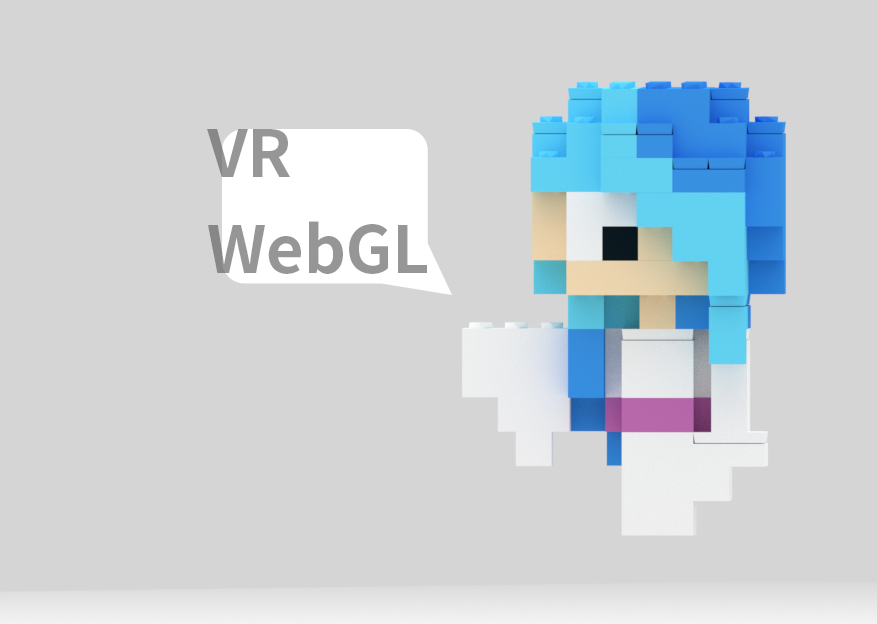
<style>
.page{position:relative;width:877px;height:624px;background:#d5d5d5}
.page>*{position:absolute;margin:0}
.t1{font:65.1px "NotoSansCJKtc-Bold";color:#969696}
</style>
<div class="page">
<p class="t1" style="left:207px;top:129px;width:83px;height:48px">VR</p>
<p class="t1" style="left:208px;top:221px;width:219px;height:53px">WebGL</p>
</div>
